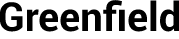
<style>
.page{position:relative;width:179px;height:39px;background:#ffffff}
.page>*{position:absolute;margin:0}
.t1{font:40px "Roboto-Bold";color:#000000}
</style>
<div class="page">
<p class="t1" style="left:0px;top:0px;width:179px;height:32px">Greenfield</p>
</div>
